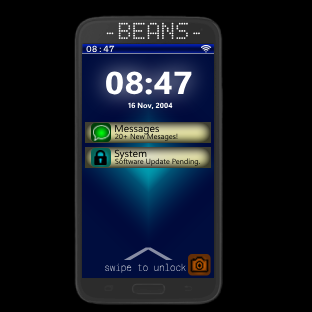
<style>
.page{position:relative;width:312px;height:312px;background:#000000}
.page>*{position:absolute;margin:0}
.t1{font:24px "BPdots";color:#ffffff}
.t2{font:8.8px "AzeretMono-Regular";color:#eeeff6}
.t3{font:31.6px "SegoeUIVariable-BoldDisplay";color:#ffffff;scale:1.09 1}
.t4{font:7.4px "SegoeUIVariable-BoldDisplay";color:#ffffff}
.t5{font:10.1px "SegoeUIVariable-Regular";color:#0a0a08;scale:1.03 1}
.t6{font:7.4px "SegoeUIVariable-Regular";color:#000000}
.t7{font:10.1px "SegoeUIVariable-Regular";color:#000000;scale:1.03 1}
.t8{font:7.4px "SegoeUIVariable-Regular"}
.t9{font:39.5px "AzeretMono-Thin";color:#878ca3;scale:3.48 1}
.t10{font:9.8px "AzeretMono-Thin";scale:0.86 1}
</style>
<div class="page">
<p class="t1" style="left:106px;top:22px;width:94px;height:17px">-BEANS-</p>
<p class="t2" style="left:86px;top:45px;width:29px;height:8px">08:47</p>
<p class="t3" style="left:106px;top:71px;width:86px;height:24px">08:47</p>
<p class="t4" style="left:128px;top:102px;width:45px;height:7px">16 Nov, 2004</p>
<p class="t5" style="left:115px;top:124px;width:44px;height:11px">Messages</p>
<p class="t6" style="left:115px;top:133px;width:63px;height:8px">20+ New Mesages!</p>
<p class="t7" style="left:114px;top:149px;width:33px;height:11px">System</p>
<p class="t8" style="left:115px;top:158px;width:85px;height:8px">Software Update Pending.</p>
<p class="t9" style="left:123px;top:247px;width:50px;height:13px">^</p>
<p class="t10" style="left:105px;top:263px;width:81px;height:10px">swipe to unlock</p>
</div>
